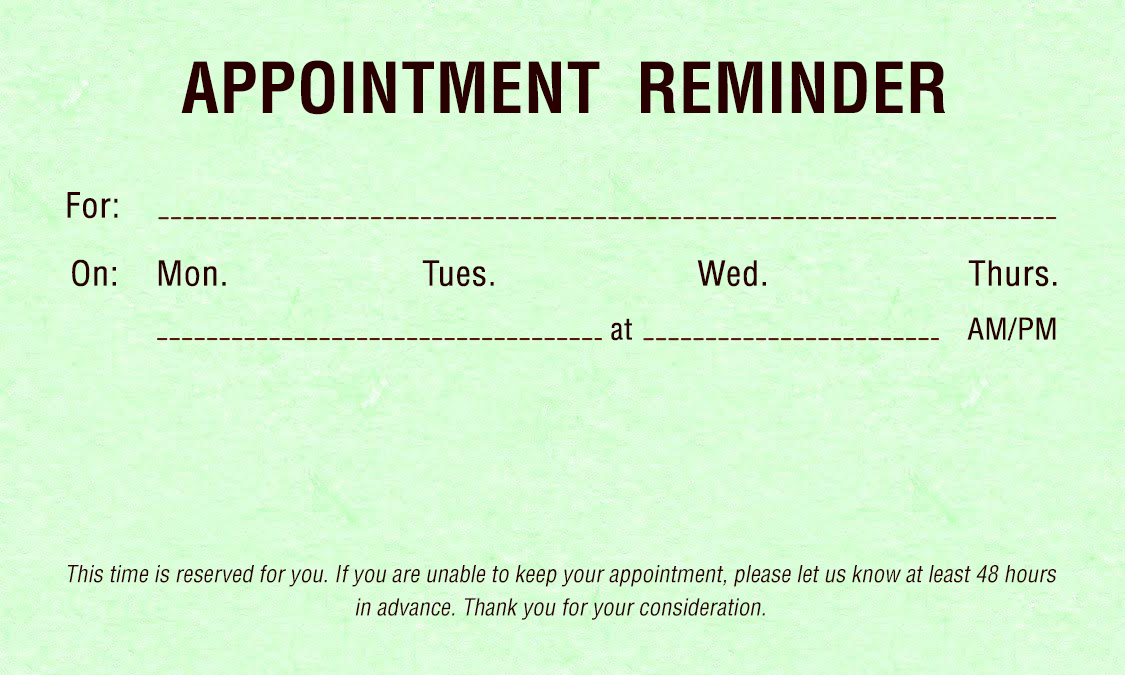
<style>
.page{position:relative;width:1125px;height:675px}
.page>*{position:absolute;margin:0}
.t1{font:68.4px "HelveticaLT-Condensed-Bold";letter-spacing:0.01em;color:#290002;text-transform:uppercase}
.t2{font:33.8px "HelveticaLT-Condensed";color:#290002;font-weight:bold}
.t3{font:29.2px "HelveticaLT-Condensed";color:#290002;font-weight:bold}
.t4{font:22.9px/33.3px "HelveticaLT-Condensed";color:#290002;font-style:italic}
</style>
<div class="page">
<p class="t1" style="left:181px;top:60px;width:764px;height:55px">Appointment  Reminder</p>
<p class="t2" style="left:67px;top:192px;width:51px;height:27px">For:</p>
<p class="t2" style="left:72px;top:259px;width:44px;height:28px">On:</p>
<p class="t2" style="left:158px;top:260px;width:68px;height:27px">Mon.</p>
<p class="t2" style="left:422px;top:260px;width:72px;height:27px">Tues.</p>
<p class="t2" style="left:697px;top:260px;width:69px;height:27px">Wed.</p>
<p class="t2" style="left:968px;top:260px;width:89px;height:27px">Thurs.</p>
<p class="t3" style="left:611px;top:318px;width:21px;height:23px">at</p>
<p class="t3" style="left:967px;top:317px;width:89px;height:24px">AM/PM</p>
<p class="t4" style="left:67px;top:565px;width:989px;height:55px;text-align:center">This time is reserved for you. If you are unable to keep your appointment, please let us know at least 48 hours in advance. Thank you for your consideration.</p>
</div>
